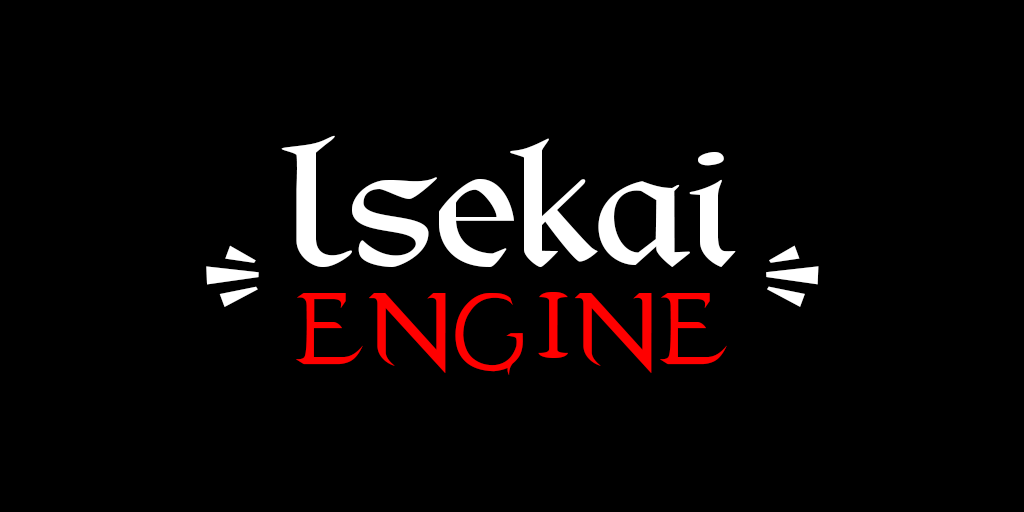
<style>
.page{position:relative;width:1024px;height:512px;background:#000000}
.page>*{position:absolute;margin:0}
.t1{font:182.9px "WonderworldPERSONALUSE-Regular";color:#ffffff}
.t2{font:182.9px "Evanescent";color:#ff0000}
</style>
<div class="page">
<p class="t1" style="left:281px;top:135px;width:455px;height:133px">Isekai</p>
<p class="t1" style="left:206px;top:245px;width:53px;height:62px">[</p>
<p class="t1" style="left:766px;top:245px;width:53px;height:62px">]</p>
<p class="t2" style="left:296px;top:292px;width:431px;height:83px">engine</p>
</div>
